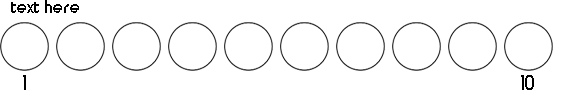
<style>
.page{position:relative;width:563px;height:97px;background:#ffffff}
.page>*{position:absolute;margin:0}
.t1{font:18px "TimeBurner-Bold";color:#000000}
</style>
<div class="page">
<p class="t1" style="left:11px;top:0px;width:68px;height:13px">text here</p>
</div>
